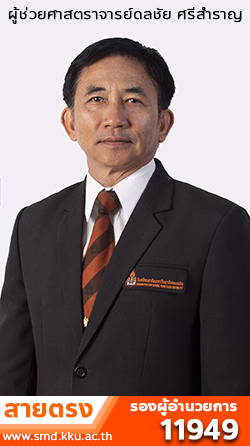
<style>
.page{position:relative;width:250px;height:446px;background:#f3eef5}
.page>*{position:absolute;margin:0}
.t1{font:15px "Anakotmai-Light";color:#000000;font-weight:bold}
.t2{font:15px "Anakotmai-Medium";color:#ffffff;font-weight:bold}
.t3{font:25px "Anakotmai-Medium";color:#fc6504;font-weight:bold}
.t4{font:28px "Anakotmai-Medium";color:#ffffff;font-weight:bold}
.t5{font:11px "Anakotmai-Light";color:#ffffff;font-weight:bold}
</style>
<div class="page">
<p class="t1" style="left:8px;top:6px;width:234px;height:18px">ผู้ช่วยศาสตราจารย์ดลชัย ศรีสำราญ</p>
<p class="t2" style="left:130px;top:398px;width:107px;height:18px">รองผู้อำนวยการ</p>
<p class="t3" style="left:4px;top:403px;width:89px;height:15px">สายตรง</p>
<p class="t4" style="left:160px;top:419px;width:78px;height:21px">11949</p>
<p class="t5" style="left:3px;top:432px;width:109px;height:9px">www.smd.kku.ac.th</p>
</div>
